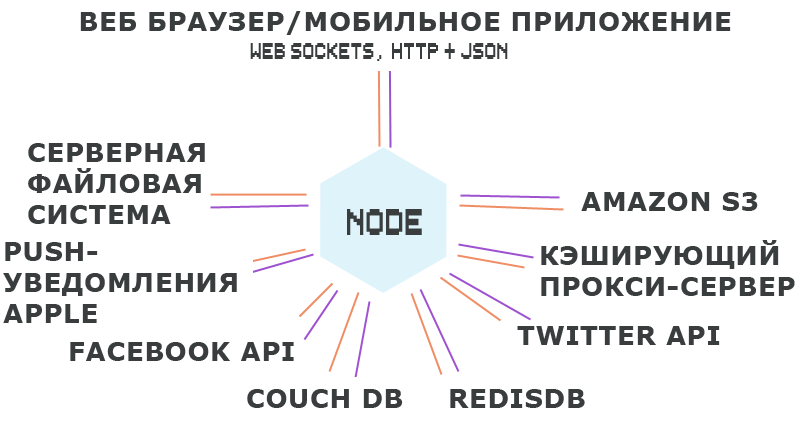
<style>
.page{position:relative;width:800px;height:432px;background:#ffffff}
.page>*{position:absolute;margin:0}
.t1{font:26px "Verdana-Bold";letter-spacing:0.025em;color:#393d3d}
</style>
<div class="page">
<p class="t1" style="left:80px;top:11px;width:651px;height:24px">ВЕБ БРАУЗЕР/МОБИЛЬНОЕ ПРИЛОЖЕНИЕ</p>
<p class="t1" style="left:28px;top:143px;width:177px;height:81px">СЕРВЕРНАЯ <br>ФАЙЛОВАЯ <br>СИСТЕМА</p>
<p class="t1" style="left:581px;top:192px;width:177px;height:19px">AMAZON S3</p>
<p class="t1" style="left:3px;top:242px;width:234px;height:81px">PUSH-<br>УВЕДОМЛЕНИЯ<br>APPLE</p>
<p class="t1" style="left:541px;top:240px;width:254px;height:56px">КЭШИРУЮЩИЙ<br>ПРОКСИ-СЕРВЕР</p>
<p class="t1" style="left:517px;top:326px;width:203px;height:19px">TWITTER API</p>
<p class="t1" style="left:70px;top:342px;width:224px;height:19px">FACEBOOK API</p>
<p class="t1" style="left:247px;top:389px;width:156px;height:19px">COUCH DB</p>
<p class="t1" style="left:450px;top:389px;width:135px;height:19px">REDISDB</p>
</div>
